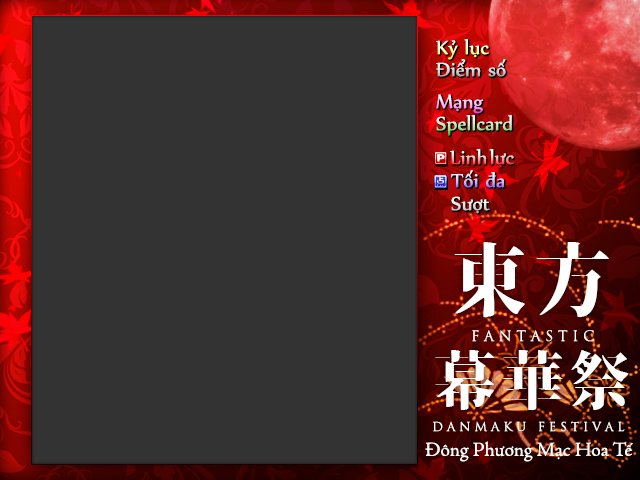
<style>
.page{position:relative;width:640px;height:480px;background:#333333}
.page>*{position:absolute;margin:0}
.t1{font:23px "UTM-Nyala"}
.t2{font:23px "UTM-Nyala";color:#e6e6e6}
.t3{font:20px "SVN-AdobeJenson";color:#ffffff}
</style>
<div class="page">
<p class="t1" style="left:436px;top:39px;width:53px;height:21px">Kỷ lục</p>
<p class="t1" style="left:436px;top:59px;width:70px;height:18px">Điểm số</p>
<p class="t1" style="left:436px;top:94px;width:48px;height:20px">Mạng</p>
<p class="t1" style="left:436px;top:115px;width:76px;height:21px">Spellcard</p>
<p class="t1" style="left:450px;top:149px;width:64px;height:19px">Linh lực</p>
<p class="t1" style="left:451px;top:170px;width:54px;height:18px">Tối đa</p>
<p class="t2" style="left:451px;top:196px;width:39px;height:18px">Sượt</p>
<p class="t3" style="left:425px;top:441px;width:208px;height:21px">Đông Phương Mạc Hoa Tế</p>
</div>
